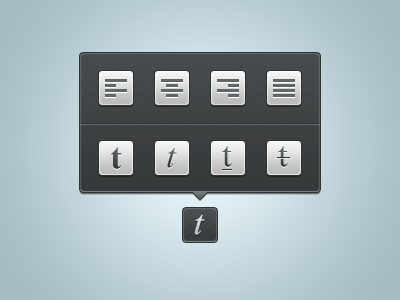
<style>
.page{position:relative;width:400px;height:300px}
.page>*{position:absolute;margin:0}
.t1{font:33.7px "TimesNewRomanPS-BoldMT";color:#464b4c}
.t2{font:33.7px "TimesNewRomanPS-ItalicMT";color:#44494a}
.t3{font:33.7px "TimesNewRomanPSMT";color:#4b5051}
.t4{font:33.7px "TimesNewRomanPSMT"}
.t5{font:33.7px "TimesNewRomanPS-ItalicMT";color:#cbd1d3;font-weight:bold}
</style>
<div class="page">
<p class="t1" style="left:111px;top:147px;width:11px;height:22px">t</p>
<p class="t2" style="left:167px;top:148px;width:10px;height:20px">t</p>
<p class="t3" style="left:222px;top:146px;width:10px;height:21px">t</p>
<p class="t4" style="left:278px;top:146px;width:10px;height:21px">t</p>
<p class="t5" style="left:194px;top:214px;width:11px;height:21px">t</p>
</div>
